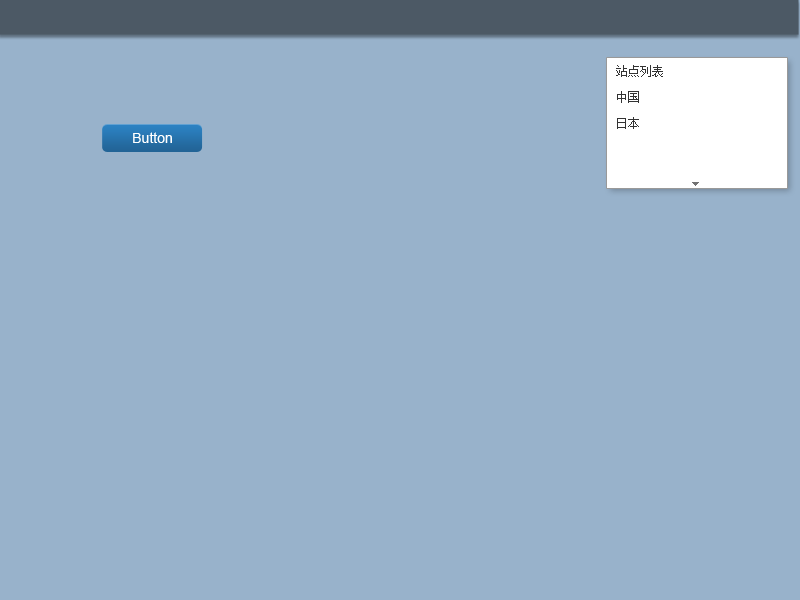
<style>
.page{position:relative;width:800px;height:600px;background:#98b2cb}
.page>*{position:absolute;margin:0}
.t1{font:12px/26px "SimSun";color:#333333}
.t2{font:14px "ArialMT";color:#ffffff}
</style>
<div class="page">
<p class="t1" style="left:616px;top:65px;width:47px;height:64px">站点列表<br>中国<br>日本</p>
<p class="t2" style="left:133px;top:132px;width:39px;height:11px">Button</p>
</div>
